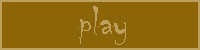
<style>
.page{position:relative;width:200px;height:50px;background:#8c6508}
.page>*{position:absolute;margin:0}
.t1{font:42.5px "Chiller-Regular";color:#bca05d}
</style>
<div class="page">
<p class="t1" style="left:78px;top:6px;width:48px;height:39px">play</p>
</div>
